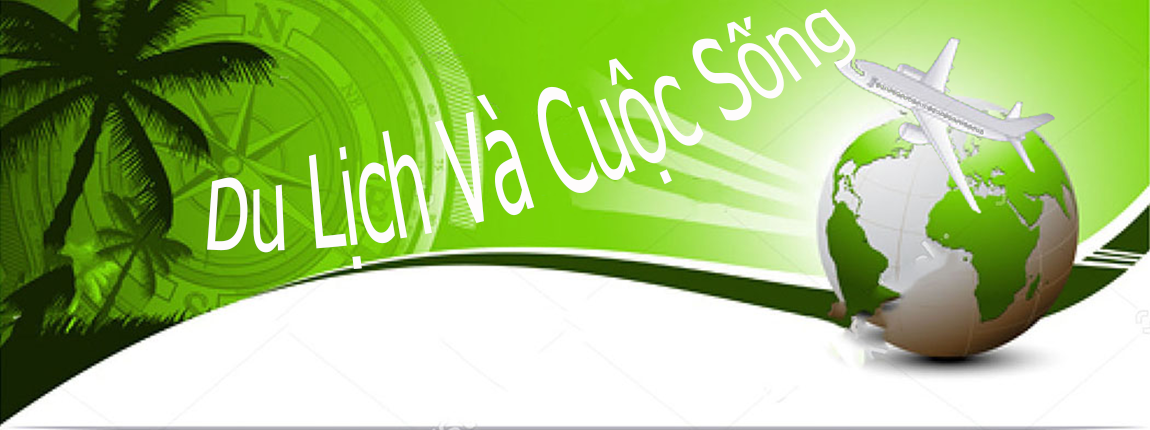
<style>
.page{position:relative;width:1150px;height:430px;background:#ffffff}
.page>*{position:absolute;margin:0}
.t1{font:73px "Tahoma";color:#fefcfc}
</style>
<div class="page">
<p class="t1" style="left:207px;top:8px;width:649px;height:261px;rotate:-19deg">Du Lịch Và Cuộc Sống</p>
</div>
